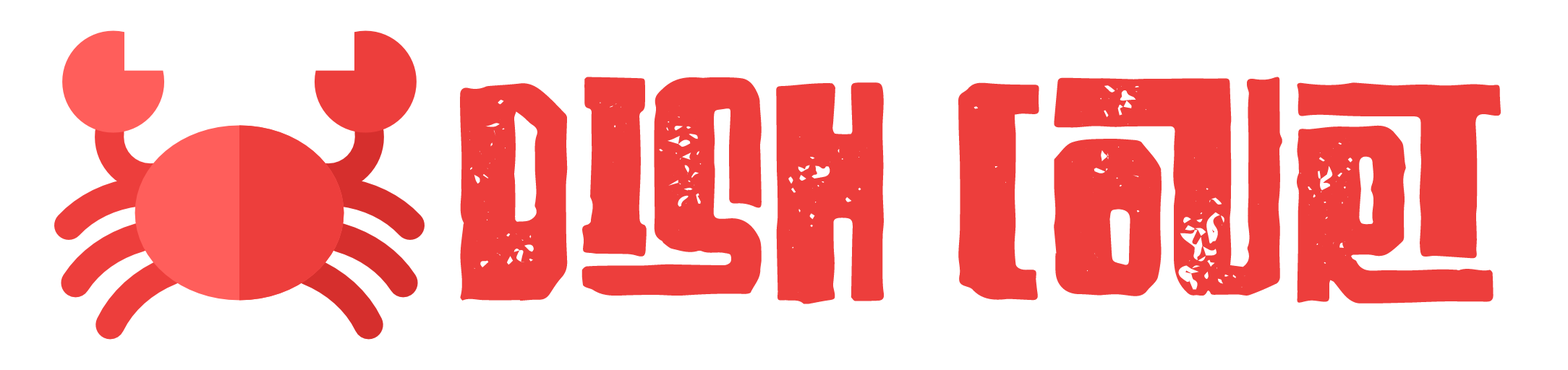
<style>
.page{position:relative;width:1568px;height:370px;background:#ffffff}
.page>*{position:absolute;margin:0}
.t1{font:310.3px "DIRTYROCKFreeVesion";color:#ed3e3c}
</style>
<div class="page">
<p class="t1" style="left:460px;top:77px;width:1041px;height:227px">DISH COURT</p>
</div>
